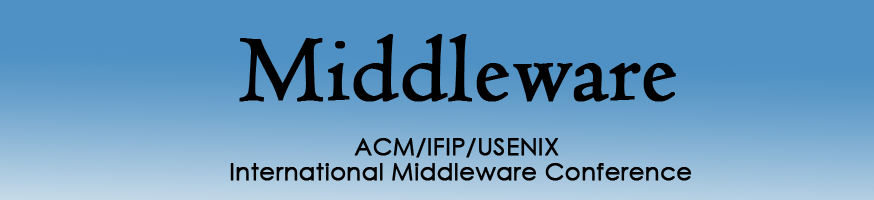
<style>
.page{position:relative;width:874px;height:200px;background:#4f91c4}
.page>*{position:absolute;margin:0}
.t1{font:96px "Centaur";color:#000000;font-weight:bold}
.t2{font:24px "CenturyGothic";color:#000000;font-weight:bold}
</style>
<div class="page">
<p class="t1" style="left:239px;top:34px;width:437px;height:68px">Middleware</p>
<p class="t2" style="left:354px;top:138px;width:205px;height:20px">ACM/IFIP/USENIX</p>
<p class="t2" style="left:230px;top:163px;width:462px;height:18px">International Middleware Conference</p>
</div>
